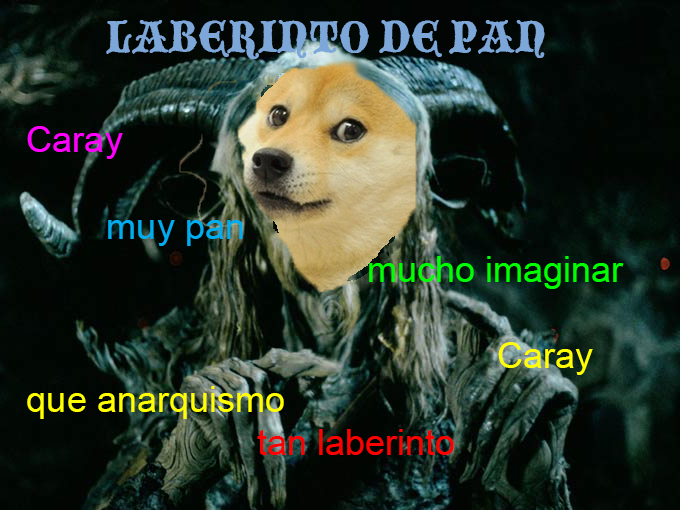
<style>
.page{position:relative;width:680px;height:510px}
.page>*{position:absolute;margin:0}
.t1{font:36px "ArialMT";color:#ffff00}
.t2{font:48px "BlackmoorLetPlain";color:#7da7d9}
.t3{font:36px "ArialMT";color:#ff00ff}
.t4{font:36px "ArialMT";color:#00aeef}
.t5{font:36px "ArialMT";color:#00ff00}
.t6{font:36px "ArialMT";color:#ff0000}
</style>
<div class="page">
<p class="t1" style="left:27px;top:20px;width:597px;height:435px;text-align:center"><span class="t2">LABERINTO DE PAN<br><br></span><span class="t3"> Caray<br><br>        </span><span class="t4"> muy pan   <br></span><span class="t5">                                   mucho imaginar<br></span>                                               <br>                                                Caray <br> que anarquismo<br><span class="t6">                        tan laberinto</span></p>
</div>
